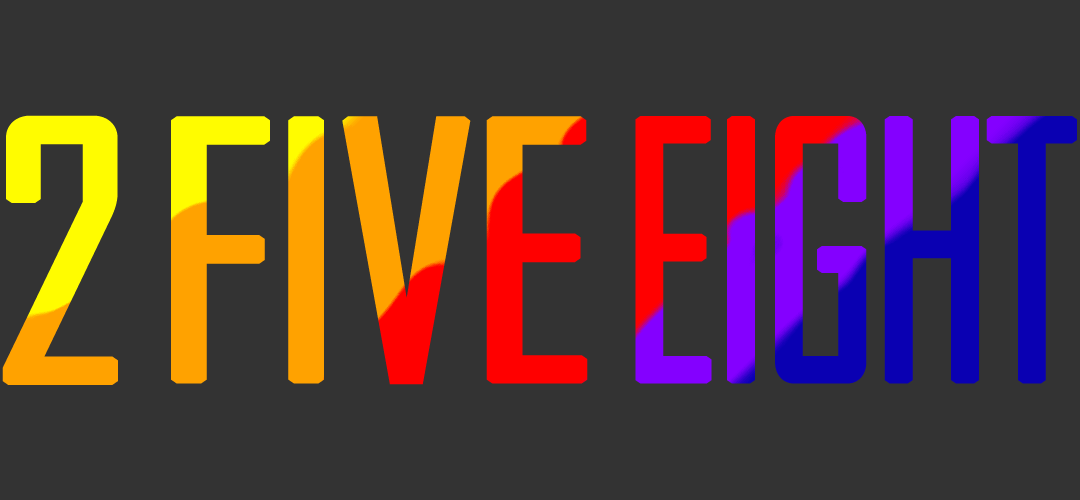
<style>
.page{position:relative;width:1080px;height:500px;background:#333333}
.page>*{position:absolute;margin:0}
.t1{font:342px "AgencyFB-Reg";font-weight:bold}
.t2{font:339.3px "AgencyFB-Reg";letter-spacing:-0.04em;font-weight:bold;scale:1.05 1}
.t3{font:341px "AgencyFB-Reg";letter-spacing:-0.04em;font-weight:bold;scale:0.77 1}
</style>
<div class="page">
<p class="t1" style="left:2px;top:115px;width:116px;height:270px">2</p>
<p class="t2" style="left:171px;top:116px;width:417px;height:269px">FIVE</p>
<p class="t3" style="left:635px;top:116px;width:442px;height:268px">EIGHT</p>
</div>
